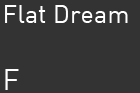
<style>
.page{position:relative;width:140px;height:93px;background:#333333}
.page>*{position:absolute;margin:0}
.t1{font:25.3px "DIN-Regular";color:#ffffff}
.t2{font:29.3px "DIN-Regular";color:#ffffff}
</style>
<div class="page">
<p class="t1" style="left:5px;top:5px;width:123px;height:18px">Flat Dream</p>
<p class="t2" style="left:5px;top:69px;width:14px;height:21px">F</p>
</div>
